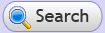
<style>
.page{position:relative;width:105px;height:33px}
.page>*{position:absolute;margin:0}
.t1{font:18px "TrebuchetMS";color:#333333}
</style>
<div class="page">
<p class="t1" style="left:36px;top:9px;width:53px;height:13px">Search</p>
</div>
